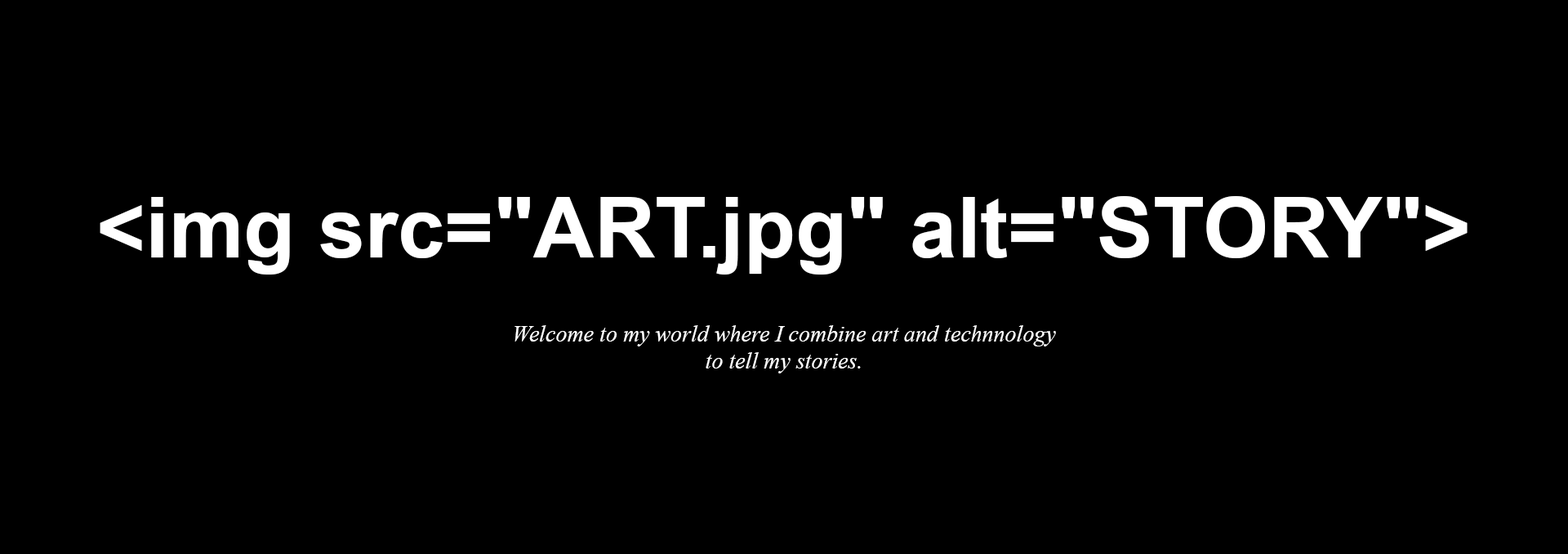
<style>
.page{position:relative;width:1568px;height:554px;background:#000000}
.page>*{position:absolute;margin:0}
.t1{font:84.1px "Arial-BoldMT";color:#ffffff}
.t2{font:22.9px "TimesNewRomanPS-ItalicMT";color:#ffffff}
</style>
<div class="page">
<p class="t1" style="left:100px;top:196px;width:1368px;height:78px">&lt;img src="ART.jpg" alt="STORY"&gt;</p>
<p class="t2" style="left:514px;top:325px;width:542px;height:48px;text-align:center">Welcome to my world where I combine art and technnology to tell my stories.</p>
</div>
